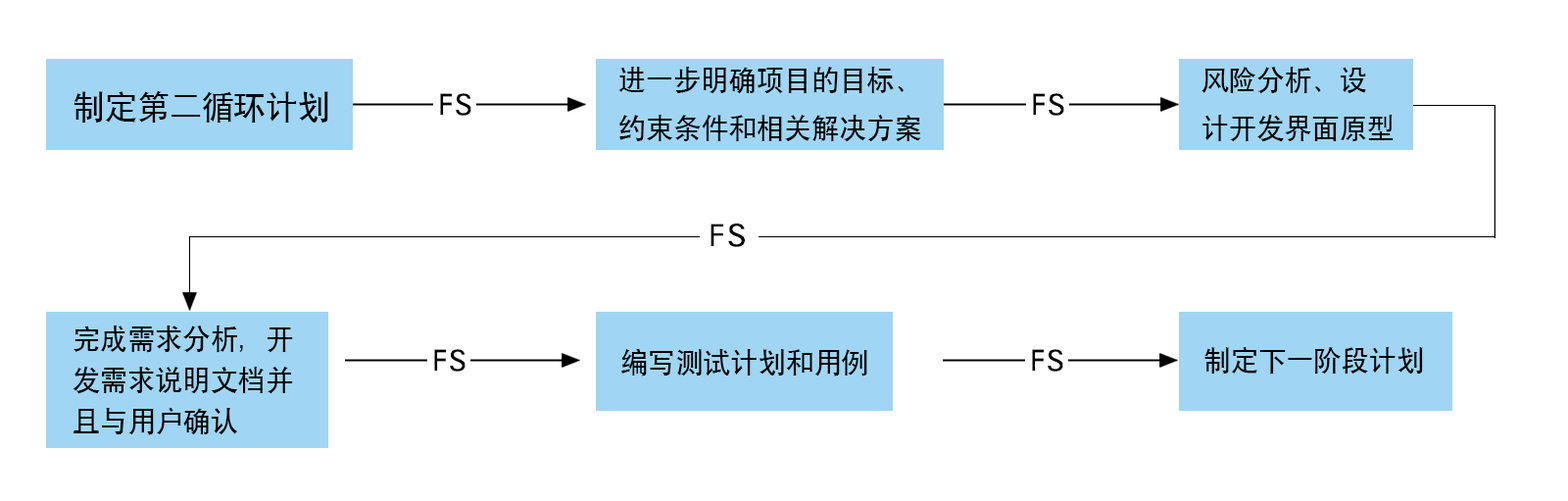
<style>
.page{position:relative;width:1568px;height:501px;background:#ffffff}
.page>*{position:absolute;margin:0}
.t1{font:27.4px "SIL-Hei-Med-Jian";color:#000000}
.t2{font:32.1px "SIL-Hei-Med-Jian";color:#000000}
.t3{font:31.2px "SIL-Hei-Med-Jian";color:#000000}
.t4{font:33.1px "SIL-Hei-Med-Jian";color:#000000}
.t5{font:27.4px/40.8px "SIL-Hei-Med-Jian";color:#000000}
</style>
<div class="page">
<p class="t1" style="left:618px;top:67px;width:303px;height:75px">进一步明确项目的目标、<br>约束条件和相关解决方案</p>
<p class="t1" style="left:1201px;top:67px;width:193px;height:75px">风险分析、设<br>计开发界面原型</p>
<p class="t2" style="left:74px;top:91px;width:254px;height:31px">制定第二循环计划</p>
<p class="t3" style="left:440px;top:93px;width:31px;height:23px">FS</p>
<p class="t3" style="left:1033px;top:93px;width:31px;height:23px">FS</p>
<p class="t4" style="left:710px;top:223px;width:35px;height:24px">FS</p>
<p class="t5" style="left:73px;top:325px;width:220px;height:110px">完成需求分析，开<br>发需求说明文档并<br>且与用户确认</p>
<p class="t3" style="left:434px;top:349px;width:32px;height:22px">FS</p>
<p class="t1" style="left:621px;top:348px;width:246px;height:28px">编写测试计划和用例</p>
<p class="t3" style="left:1032px;top:349px;width:31px;height:22px">FS</p>
<p class="t1" style="left:1204px;top:347px;width:219px;height:27px">制定下一阶段计划</p>
</div>
